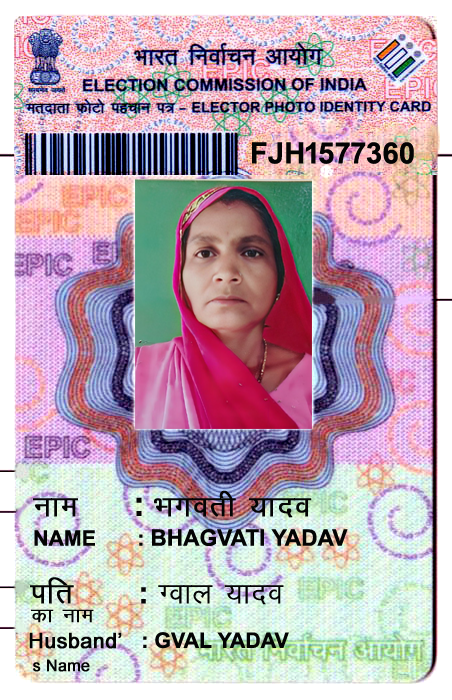
<style>
.page{position:relative;width:452px;height:700px}
.page>*{position:absolute;margin:0}
.t1{font:29.3px "Arial-BoldMT";color:#040404}
.t2{font:34.7px "KrutiDev010";color:#040404;font-weight:bold}
.t3{font:34.7px "Arial-BoldMT";color:#040404}
.t4{font:22.7px "Arial-BoldMT";color:#040404}
.t5{font:21.3px "Arial-BoldMT";color:#040404}
.t6{font:34.7px "KrutiDev010";color:#040404}
.t7{font:30.7px "Arial-BoldMT";color:#040404}
.t8{font:24px "KrutiDev010";color:#040404;font-weight:bold}
.t9{font:21.3px "ArialMT";color:#040404;font-weight:bold}
.t10{font:16px "ArialMT";color:#040404;font-weight:bold}
</style>
<div class="page">
<p class="t1" style="left:252px;top:142px;width:162px;height:22px">FJH1577360</p>
<p class="t2" style="left:33px;top:490px;width:279px;height:28px">uke    <span class="t3">: </span>Hkxorh ;kno</p>
<p class="t4" style="left:34px;top:529px;width:314px;height:17px"><span class="t5">NAME       : </span>BHAGVATI YADAV</p>
<p class="t6" style="left:30px;top:577px;width:254px;height:28px"><span class="t2">ifr     </span><span class="t7">: </span>Xoky ;kno</p>
<p class="t8" style="left:31px;top:609px;width:63px;height:14px">dk uke</p>
<p class="t5" style="left:29px;top:632px;width:260px;height:17px"><span class="t9">Husband’   </span>: GVAL YADAV</p>
<p class="t10" style="left:33px;top:659px;width:57px;height:13px">s Name</p>
</div>
